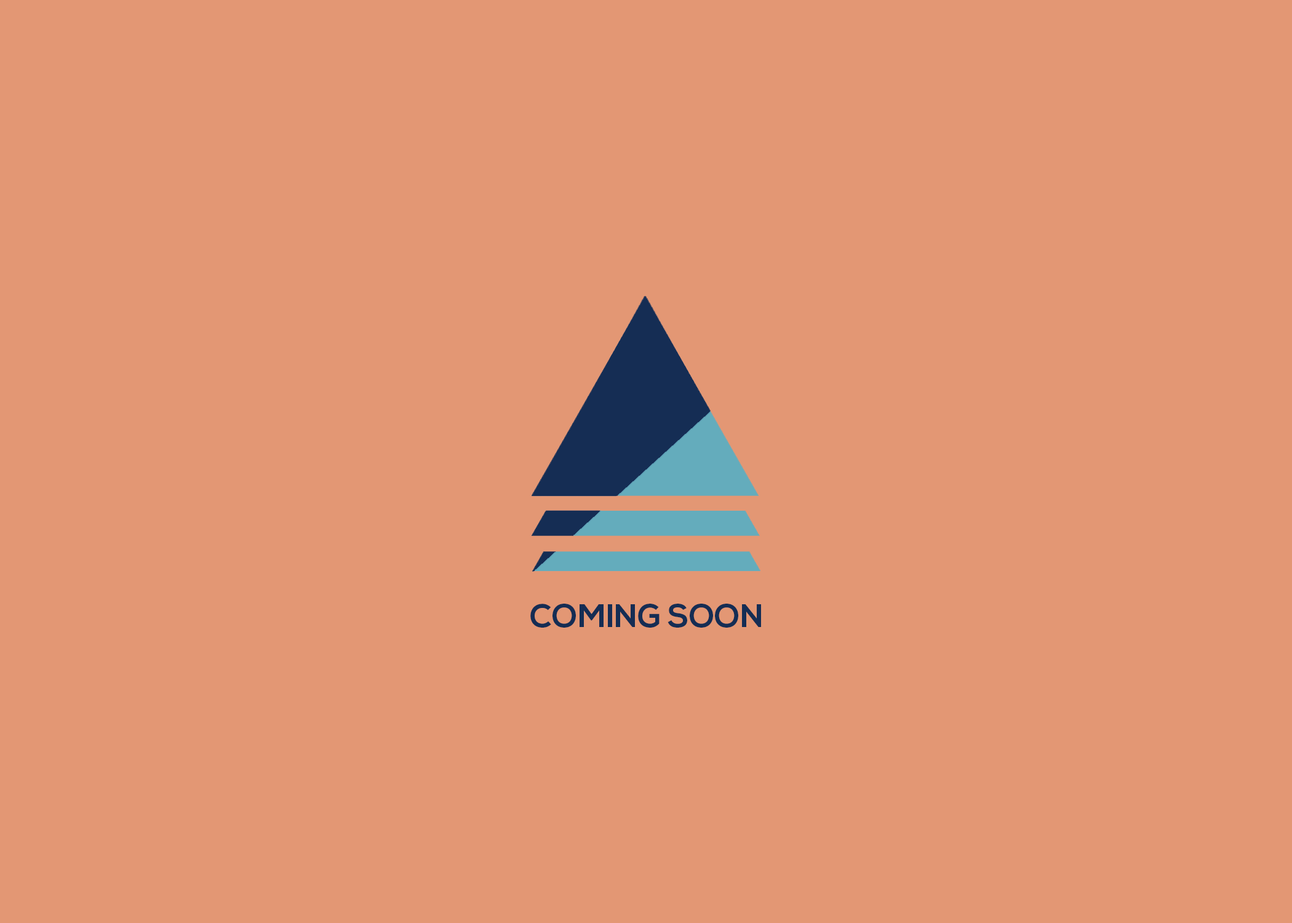
<style>
.page{position:relative;width:1292px;height:923px;background:#e39774}
.page>*{position:absolute;margin:0}
.t1{font:32.5px "NexaBold";color:#152d54}
</style>
<div class="page">
<p class="t1" style="left:530px;top:604px;width:231px;height:24px">COMING SOON</p>
</div>
